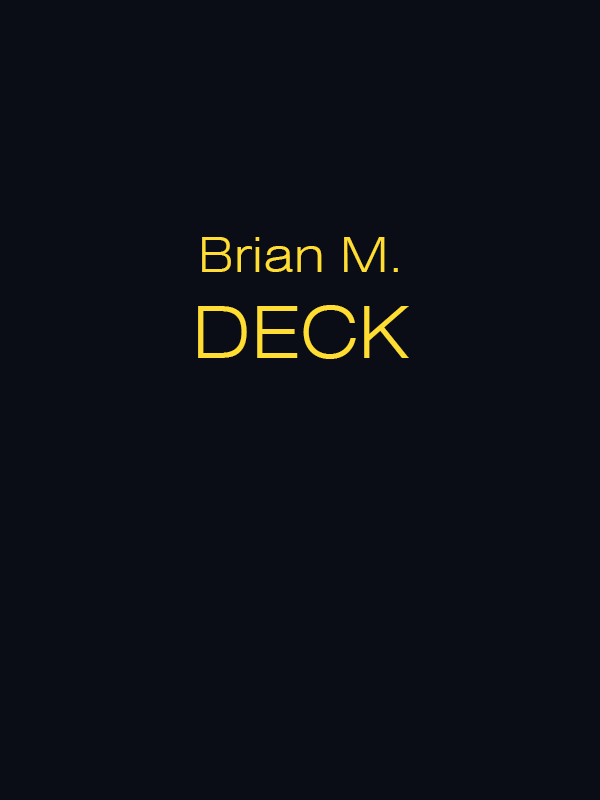
<style>
.page{position:relative;width:600px;height:800px;background:#0a0c16}
.page>*{position:absolute;margin:0}
.t1{font:48px "Swiss721BT-LightExtended";color:#ffdd33}
.t2{font:72px "Swiss721BT-LightExtended";color:#ffdd33}
</style>
<div class="page">
<p class="t1" style="left:198px;top:237px;width:211px;height:122px;text-align:center">Brian M.<br><span class="t2">DECK</span></p>
</div>
